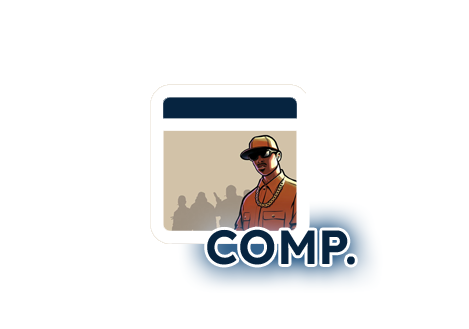
<style>
.page{position:relative;width:469px;height:329px;background:#ffffff}
.page>*{position:absolute;margin:0}
.t1{font:48px "Lexend-SemiBold";color:#062440}
</style>
<div class="page">
<p class="t1" style="left:207px;top:229px;width:148px;height:36px">COMP.</p>
</div>
